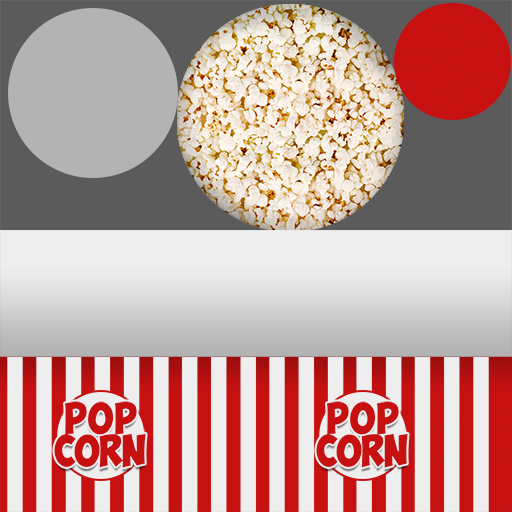
<style>
.page{position:relative;width:512px;height:512px}
.page>*{position:absolute;margin:0}
.t1{font:31.2px/32.5px "ObelixPro";letter-spacing:-0.02em;color:#c71111}
.t2{font:31.2px/27.3px "ObelixPro";letter-spacing:0.04em;color:#c71111}
</style>
<div class="page">
<p class="t1" style="left:54px;top:401px;width:92px;height:67px;text-align:center"><span class="t2">POP<br></span>CORN</p>
<p class="t1" style="left:316px;top:401px;width:92px;height:67px;text-align:center"><span class="t2">POP<br></span>CORN</p>
</div>
